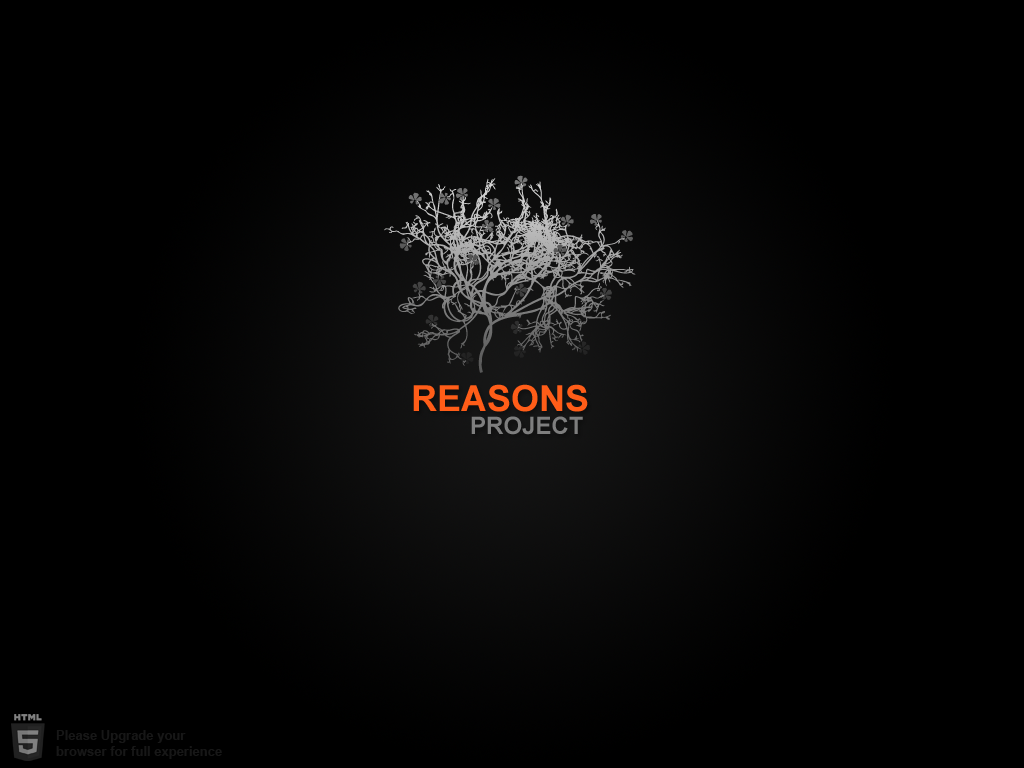
<style>
.page{position:relative;width:1024px;height:768px;background:#000000}
.page>*{position:absolute;margin:0}
.t1{font:36px "Arial-BoldMT";color:#ff5d18}
.t2{font:24px "Arial-BoldMT";color:#7e7e7e}
.t3{font:13px/16px "Arial-BoldMT";color:#171717}
</style>
<div class="page">
<p class="t1" style="left:413px;top:384px;width:175px;height:28px">REASONS</p>
<p class="t2" style="left:471px;top:416px;width:112px;height:19px">PROJECT</p>
<p class="t3" style="left:56px;top:730px;width:166px;height:29px">Please Upgrade your<br>browser for full experience</p>
</div>
